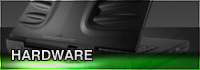
<style>
.page{position:relative;width:200px;height:70px}
.page>*{position:absolute;margin:0}
.t1{font:14px "Swiss721BT-Bold";color:#e2e1e1}
</style>
<div class="page">
<p class="t1" style="left:12px;top:50px;width:81px;height:10px">HARDWARE</p>
</div>
